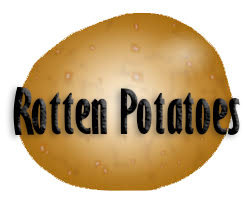
<style>
.page{position:relative;width:244px;height:206px;background:#ffffff}
.page>*{position:absolute;margin:0}
.t1{font:60px "GillSansMT-ExtraCondensedBold";color:#000000}
</style>
<div class="page">
<p class="t1" style="left:13px;top:87px;width:227px;height:48px">Rotten Potatoes</p>
</div>
